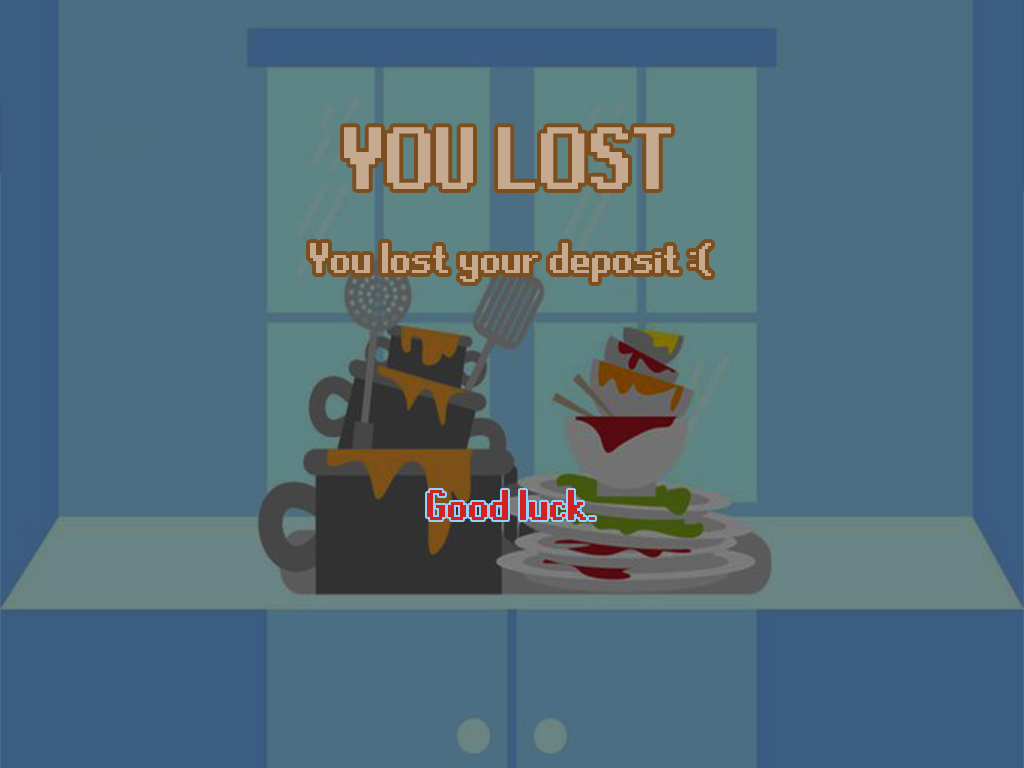
<style>
.page{position:relative;width:1024px;height:768px;background:#4c6e85}
.page>*{position:absolute;margin:0}
.t1{font:98.8px "RuneScape-UF";color:#c5aa8f}
.t2{font:48px "RuneScape-UF";color:#c5aa8f}
.t3{font:48px "RuneScape-UF";color:#d22222}
</style>
<div class="page">
<p class="t1" style="left:344px;top:127px;width:327px;height:62px">YOU LOST</p>
<p class="t2" style="left:310px;top:243px;width:401px;height:39px">You lost your deposit :(</p>
<p class="t3" style="left:427px;top:490px;width:168px;height:30px">Good luck.</p>
</div>
